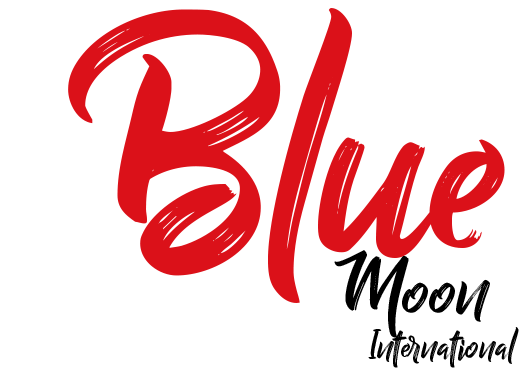
<style>
.page{position:relative;width:519px;height:389px;background:#ffffff}
.page>*{position:absolute;margin:0}
.t1{font:340.2px "BillyOhio";color:#db1119}
.t2{font:85.4px "BillyOhio";color:#000000}
.t3{font:42.5px "BillyOhio";color:#000000}
</style>
<div class="page">
<p class="t1" style="left:68px;top:8px;width:437px;height:295px">Blue</p>
<p class="t2" style="left:334px;top:250px;width:156px;height:88px">Moon</p>
<p class="t3" style="left:368px;top:327px;width:151px;height:41px">International</p>
</div>
